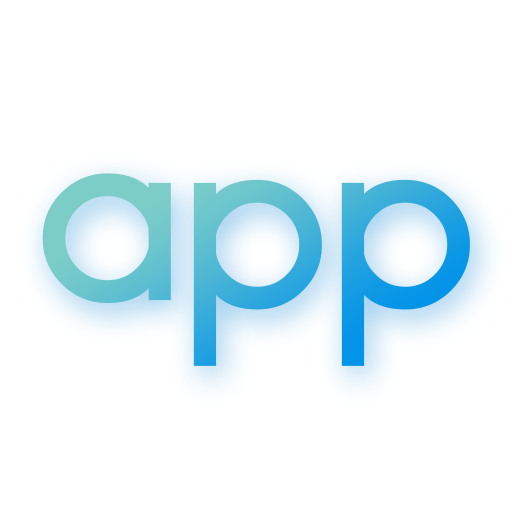
<style>
.page{position:relative;width:512px;height:512px;background:#ffffff}
.page>*{position:absolute;margin:0}
.t1{font:267.7px "Champagne&LimousinesThick"}
</style>
<div class="page">
<p class="t1" style="left:42px;top:173px;width:428px;height:193px">app</p>
</div>
